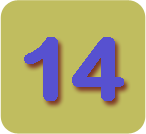
<style>
.page{position:relative;width:146px;height:134px;background:#c0bd5f}
.page>*{position:absolute;margin:0}
.t1{font:86.1px "ArialRoundedMTBold";letter-spacing:-0.01em;color:#5751d0;font-weight:bold}
</style>
<div class="page">
<p class="t1" style="left:24px;top:37px;width:100px;height:64px">14</p>
</div>
